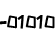
<style>
.page{position:relative;width:55px;height:44px;background:#ffffff}
.page>*{position:absolute;margin:0}
.t1{font:17.3px "ZCOOLKuaiLe-Regular";color:#000000;font-weight:bold}
</style>
<div class="page">
<p class="t1" style="left:7px;top:15px;width:48px;height:14px">01010</p>
</div>
